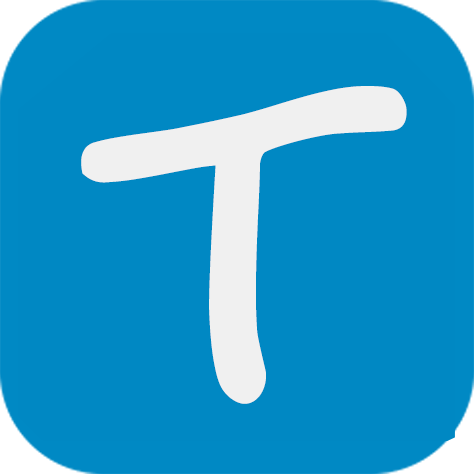
<style>
.page{position:relative;width:474px;height:474px;background:#0088c3}
.page>*{position:absolute;margin:0}
.t1{font:415.6px "SegoeScript";letter-spacing:-0.06em;color:#f0f0f0;font-weight:bold}
</style>
<div class="page">
<p class="t1" style="left:81px;top:86px;width:326px;height:318px;rotate:-4deg">T</p>
</div>
